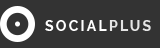
<style>
.page{position:relative;width:160px;height:48px;background:#333333}
.page>*{position:absolute;margin:0}
.t1{font:14px "Raleway-Bold";letter-spacing:0.162em;color:#ffffff}
.t2{font:14px "Raleway-Bold";letter-spacing:0.162em;color:#e5e5e5}
</style>
<div class="page">
<p class="t1" style="left:45px;top:20px;width:106px;height:11px">SOCIAL<span class="t2">PLUS</span></p>
</div>
